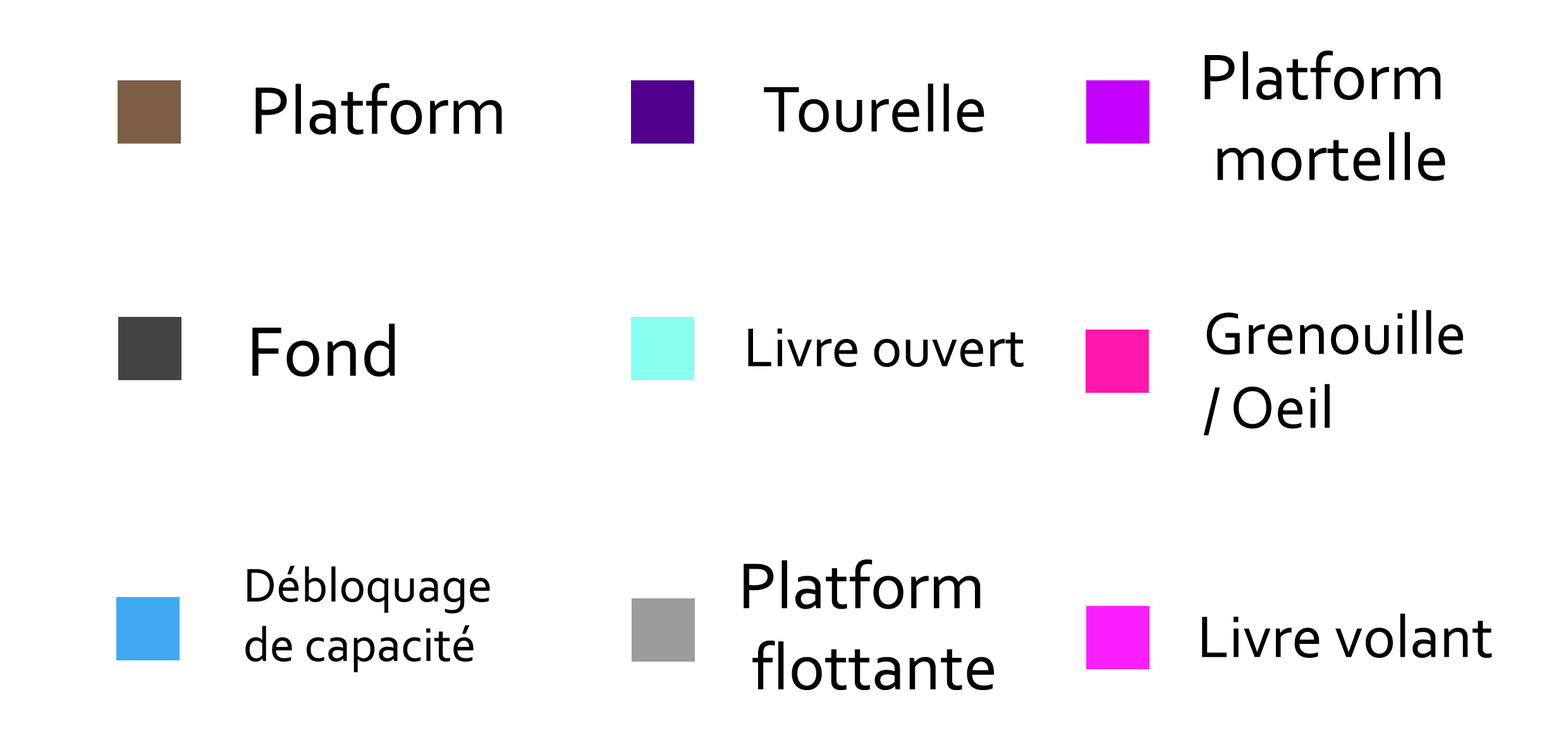
<style>
.page{position:relative;width:1568px;height:747px;background:#ffffff}
.page>*{position:absolute;margin:0}
.t1{font:67.3px "Corbel";color:#010101}
.t2{font:70.3px "Corbel";color:#010101}
.t3{font:67.4px "Corbel";color:#010101}
.t4{font:61.6px "Corbel";color:#010101}
.t5{font:73.2px "Corbel";color:#010101}
.t6{font:57px "Corbel";color:#010101}
.t7{font:49.5px "Corbel";color:#010101}
.t8{font:67.6px "Corbel";color:#010101}
.t9{font:61.2px "Corbel";color:#010101}
</style>
<div class="page">
<p class="t1" style="left:1204px;top:51px;width:241px;height:130px">Platform<br> mortelle</p>
<p class="t2" style="left:255px;top:83px;width:247px;height:52px">Platform</p>
<p class="t3" style="left:764px;top:83px;width:220px;height:49px">Tourelle</p>
<p class="t4" style="left:1204px;top:310px;width:259px;height:126px">Grenouille<br>/ Oeil</p>
<p class="t5" style="left:252px;top:323px;width:143px;height:54px">Fond</p>
<p class="t6" style="left:748px;top:328px;width:276px;height:39px">Livre ouvert</p>
<p class="t7" style="left:245px;top:565px;width:245px;height:107px">Débloquage <br>de capacité</p>
<p class="t8" style="left:744px;top:559px;width:250px;height:131px">Platform<br> flottante</p>
<p class="t9" style="left:1202px;top:613px;width:290px;height:45px">Livre volant</p>
</div>
